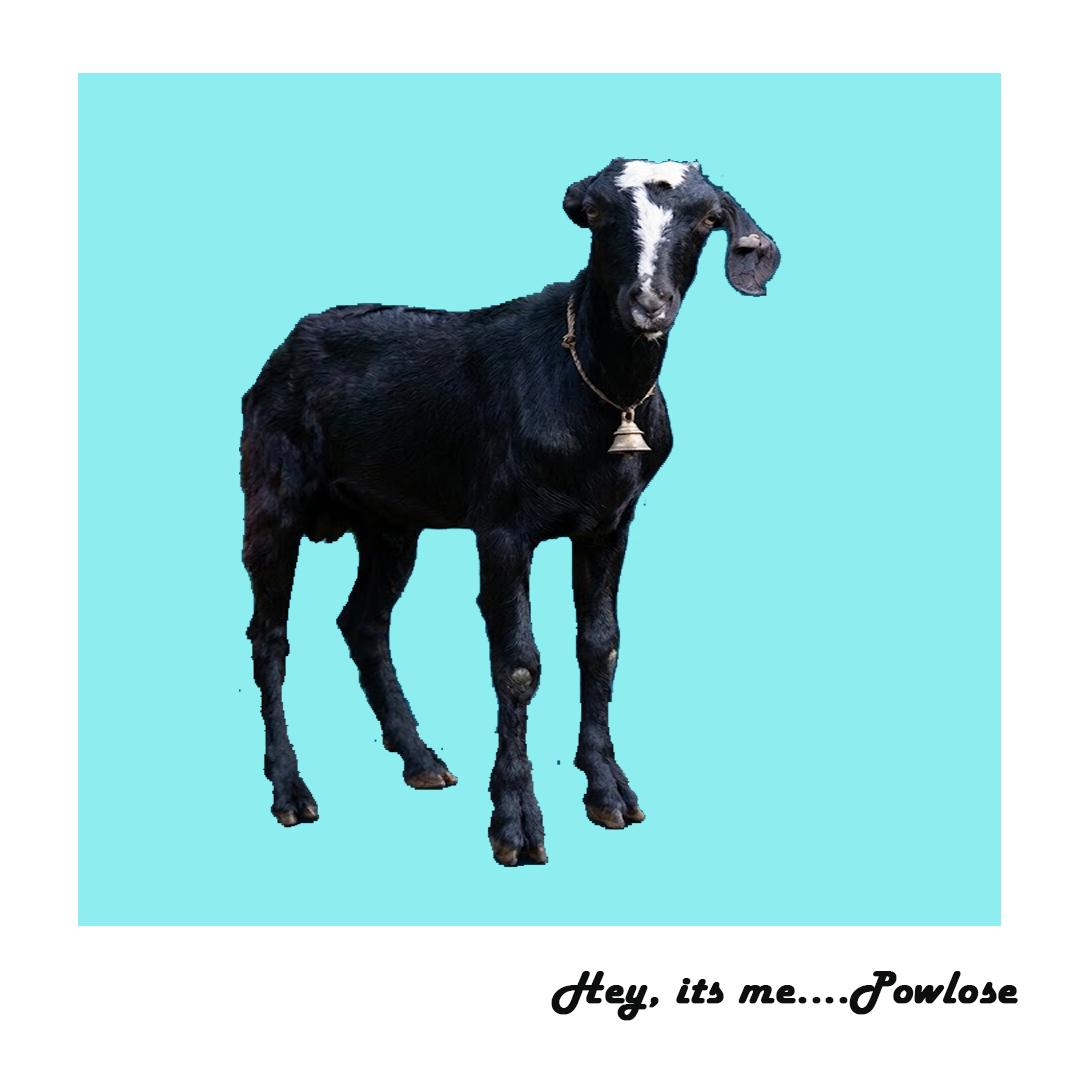
<style>
.page{position:relative;width:1080px;height:1080px;background:#8eeeef}
.page>*{position:absolute;margin:0}
.t1{font:48px "HarlowSolid";letter-spacing:0.01em;color:#0d0e0e;font-weight:bold}
</style>
<div class="page">
<p class="t1" style="left:551px;top:971px;width:467px;height:50px">Hey, its me....Powlose</p>
</div>
